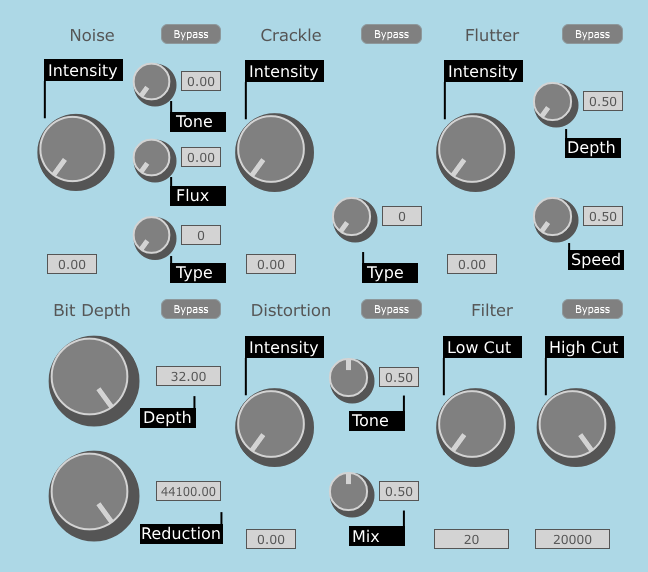
<style>
.page{position:relative;width:648px;height:572px;background:#add8e6}
.page>*{position:absolute;margin:0}
.t1{font:16px "DejaVuSans";color:#ffffff}
</style>
<div class="page">
<p class="t1" style="left:49px;top:63px;width:69px;height:17px">Intensity</p>
<p class="t1" style="left:250px;top:64px;width:69px;height:17px">Intensity</p>
<p class="t1" style="left:449px;top:64px;width:69px;height:17px">Intensity</p>
<p class="t1" style="left:175px;top:115px;width:37px;height:13px">Tone</p>
<p class="t1" style="left:568px;top:140px;width:47px;height:17px">Depth</p>
<p class="t1" style="left:177px;top:188px;width:32px;height:14px">Flux</p>
<p class="t1" style="left:572px;top:252px;width:48px;height:17px">Speed</p>
<p class="t1" style="left:175px;top:266px;width:37px;height:16px">Type</p>
<p class="t1" style="left:366px;top:266px;width:37px;height:16px">Type</p>
<p class="t1" style="left:250px;top:340px;width:69px;height:17px">Intensity</p>
<p class="t1" style="left:448px;top:341px;width:63px;height:13px">Low Cut</p>
<p class="t1" style="left:550px;top:340px;width:69px;height:17px">High Cut</p>
<p class="t1" style="left:144px;top:410px;width:47px;height:17px">Depth</p>
<p class="t1" style="left:351px;top:414px;width:37px;height:13px">Tone</p>
<p class="t1" style="left:142px;top:526px;width:78px;height:14px">Reduction</p>
<p class="t1" style="left:353px;top:529px;width:27px;height:13px">Mix</p>
</div>
